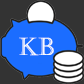
<style>
.page{position:relative;width:84px;height:84px;background:#333333}
.page>*{position:absolute;margin:0}
.t1{font:24px "Castellar";color:#f9fafd;text-transform:uppercase}
</style>
<div class="page">
<p class="t1" style="left:19px;top:37px;width:35px;height:19px">KB</p>
</div>
